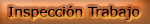
<style>
.page{position:relative;width:150px;height:24px}
.page>*{position:absolute;margin:0}
.t1{font:14px "Verdana"}
</style>
<div class="page">
<p class="t1" style="left:9px;top:6px;width:131px;height:14px">Inspección Trabajo</p>
</div>
